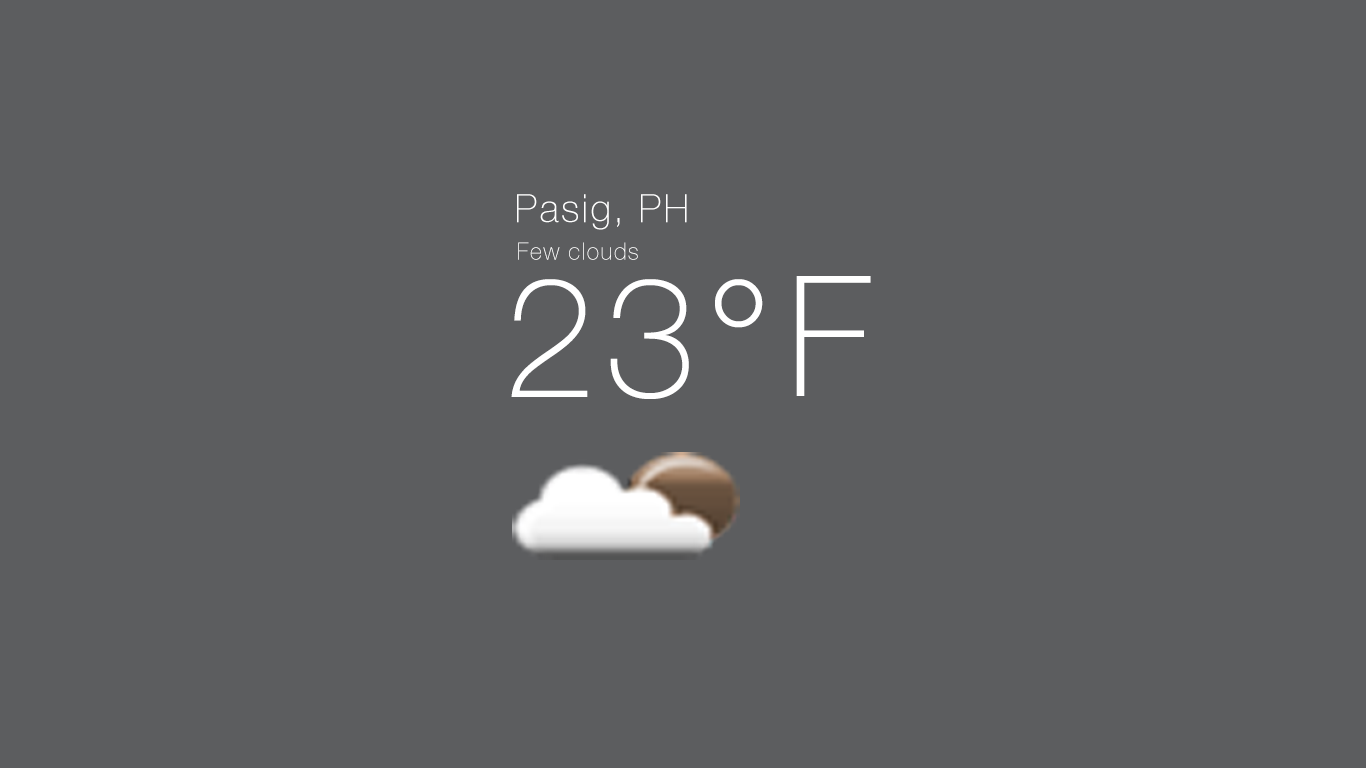
<style>
.page{position:relative;width:1366px;height:768px;background:#5c5d5f}
.page>*{position:absolute;margin:0}
.t1{font:39px "HelveticaNeueThin";letter-spacing:0.06em;color:#ffffff}
.t2{font:23.4px "HelveticaNeueThin";letter-spacing:0.06em;color:#ffffff}
.t3{font:167.7px "HelveticaNeueThin";letter-spacing:0.06em;color:#ffffff}
</style>
<div class="page">
<p class="t1" style="left:517px;top:194px;width:170px;height:36px">Pasig, PH</p>
<p class="t2" style="left:518px;top:242px;width:120px;height:18px">Few clouds</p>
<p class="t3" style="left:511px;top:279px;width:252px;height:120px">23°</p>
<p class="t3" style="left:796px;top:276px;width:75px;height:120px">F</p>
</div>
